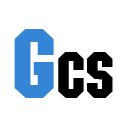
<style>
.page{position:relative;width:128px;height:128px;background:#ffffff}
.page>*{position:absolute;margin:0}
.t1{font:96px "MachineLT";color:#3585d7}
.t2{font:64px "MachineLT";color:#000000}
</style>
<div class="page">
<p class="t1" style="left:14px;top:29px;width:40px;height:69px">G</p>
<p class="t2" style="left:58px;top:52px;width:55px;height:46px">CS</p>
</div>
